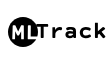
<style>
.page{position:relative;width:110px;height:64px;background:#ffffff}
.page>*{position:absolute;margin:0}
.t1{font:24.3px "CourierPrimeSans-Bold";color:#ffffff}
.t2{font:24px "CourierPrimeSans-Bold";color:#000000}
</style>
<div class="page">
<p class="t1" style="left:12px;top:25px;width:26px;height:15px">ML</p>
<p class="t2" style="left:36px;top:22px;width:70px;height:17px">Track</p>
</div>
